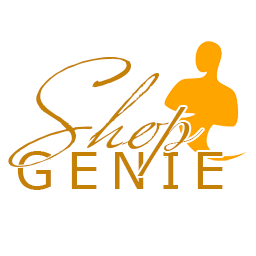
<style>
.page{position:relative;width:256px;height:256px;background:#ffffff}
.page>*{position:absolute;margin:0}
.t1{font:123.6px "Versitia";color:#c48105}
.t2{font:79px "SnellRoundhand";color:#c48105}
.t3{font:51.2px "Verdana";letter-spacing:0.22em;color:#c48105;text-transform:uppercase}
</style>
<div class="page">
<p class="t1" style="left:8px;top:57px;width:162px;height:110px">Sho</p>
<p class="t2" style="left:137px;top:107px;width:66px;height:69px">p</p>
<p class="t3" style="left:17px;top:151px;width:206px;height:39px">Genie</p>
</div>
